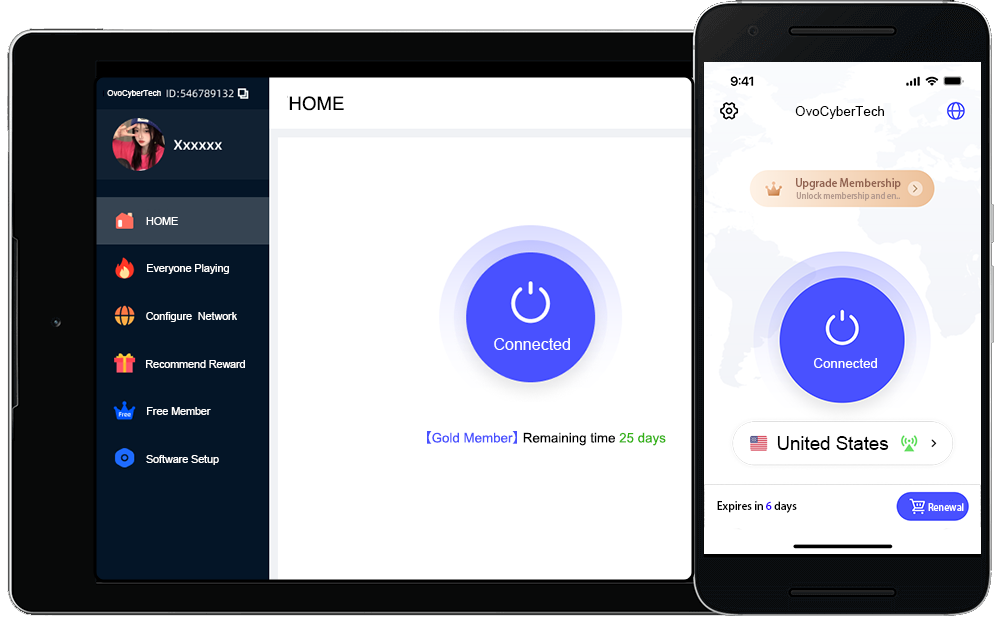
<style>
.page{position:relative;width:1000px;height:644px;background:#ffffff}
.page>*{position:absolute;margin:0}
.t1{font:8px "ArialMT";color:#ffffff}
.t2{font:18.7px "ArialMT";color:#000000}
.t3{font:13.3px "ArialMT";color:#000000}
.t4{font:10.7px "AdobeHeitiStd-Regular";color:#926351}
.t5{font:8px "AdobeHeitiStd-Regular";color:#b59b8f}
.t6{font:10.7px "ArialMT";color:#ffffff}
.t7{font:16px "ArialMT";color:#ffffff}
.t8{font:13.3px "ArialMT";color:#ffffff}
.t9{font:13.3px "AdobeHeitiStd-Regular";color:#4951ff}
.t10{font:13.3px "ArialMT";color:#4951ff}
.t11{font:13.3px "ArialMT";color:#33b313}
.t12{font:10.7px "AdobeHeitiStd-Regular";color:#000000}
.t13{font:10.7px "AdobeHeitiStd-Regular";color:#2a00ff}
.t14{font:9.3px "AdobeHeitiStd-Regular";color:#ffffff}
</style>
<div class="page">
<p class="t1" style="left:107px;top:90px;width:54px;height:8px">OvoCyberTech</p>
<p class="t2" style="left:289px;top:96px;width:55px;height:15px">HOME</p>
<p class="t3" style="left:795px;top:106px;width:89px;height:13px">OvoCyberTech</p>
<p class="t4" style="left:796px;top:178px;width:105px;height:12px">Upgrade Membership</p>
<p class="t5" style="left:796px;top:192px;width:104px;height:9px">Unlock membership and en..</p>
<p class="t6" style="left:146px;top:217px;width:32px;height:8px">HOME</p>
<p class="t6" style="left:147px;top:264px;width:82px;height:10px">Everyone Playing</p>
<p class="t6" style="left:146px;top:312px;width:91px;height:10px">Configure  Network</p>
<p class="t7" style="left:494px;top:338px;width:76px;height:12px">Connected</p>
<p class="t6" style="left:146px;top:360px;width:99px;height:8px">Recommend Reward</p>
<p class="t8" style="left:814px;top:358px;width:63px;height:10px">Connected</p>
<p class="t6" style="left:147px;top:407px;width:64px;height:8px">Free Member</p>
<p class="t3" style="left:427px;top:431px;width:239px;height:15px"><span class="t9">【</span><span class="t10">Gold Member</span><span class="t9">】 </span>Remaining time <span class="t11">25 days</span></p>
<p class="t2" style="left:777px;top:436px;width:112px;height:14px">United States</p>
<p class="t6" style="left:146px;top:455px;width:73px;height:10px">Software Setup</p>
<p class="t12" style="left:717px;top:501px;width:80px;height:12px">Expires in <span class="t13">6 </span>days</p>
<p class="t14" style="left:928px;top:503px;width:36px;height:8px">Renewal</p>
</div>
